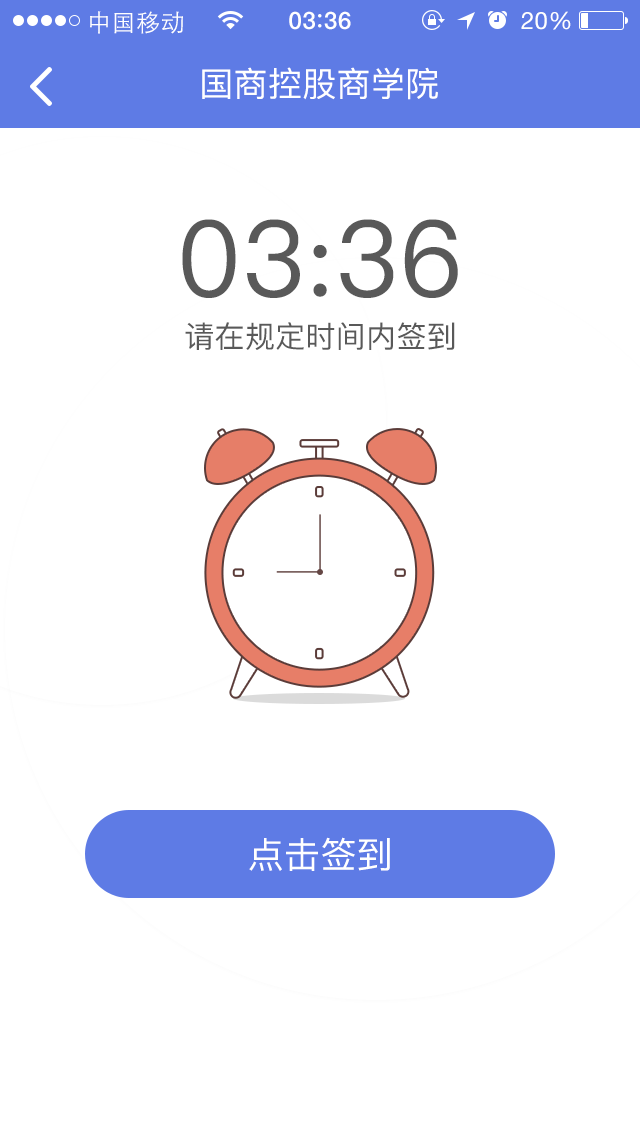
<style>
.page{position:relative;width:640px;height:1136px;background:#ffffff}
.page>*{position:absolute;margin:0}
.t1{font:24px "STHeitiSC-Light";letter-spacing:0.02em;color:#ffffff}
.t2{font:24px "HelveticaNeue-Medium";letter-spacing:0.03em;color:#ffffff}
.t3{font:24px "HelveticaNeue";letter-spacing:0.02em;color:#ffffff}
.t4{font:34px "PingFangSC-Regular";letter-spacing:0.01em;color:#ffffff}
.t5{font:105.7px "PingFangSC-Regular";letter-spacing:0.01em;color:#595959}
.t6{font:30px "PingFangSC-Regular";letter-spacing:0.01em;color:#595959}
.t7{font:36px "PingFangSC-Regular";letter-spacing:0.01em;color:#ffffff}
</style>
<div class="page">
<p class="t1" style="left:90px;top:11px;width:93px;height:23px">中国移动</p>
<p class="t2" style="left:289px;top:11px;width:62px;height:19px">03 36</p>
<p class="t3" style="left:521px;top:11px;width:50px;height:19px">20%</p>
<p class="t4" style="left:202px;top:67px;width:236px;height:33px">国商控股商学院</p>
<p class="t5" style="left:182px;top:219px;width:276px;height:79px">03:36</p>
<p class="t6" style="left:185px;top:322px;width:270px;height:28px">请在规定时间内签到</p>
<p class="t7" style="left:249px;top:837px;width:141px;height:34px">点击签到</p>
</div>
